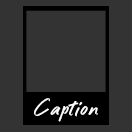
<style>
.page{position:relative;width:132px;height:132px;background:#333333}
.page>*{position:absolute;margin:0}
.t1{font:27px "JettaKloots";letter-spacing:0.05em;color:#ffffff}
</style>
<div class="page">
<p class="t1" style="left:34px;top:98px;width:64px;height:24px">Caption</p>
</div>
